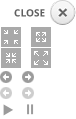
<style>
.page{position:relative;width:76px;height:119px;background:#ffffff}
.page>*{position:absolute;margin:0}
.t1{font:10px "OpenSans-Bold";color:#5f5f5f}
</style>
<div class="page">
<p class="t1" style="left:14px;top:9px;width:31px;height:8px">CLOSE</p>
</div>
